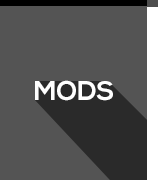
<style>
.page{position:relative;width:158px;height:180px;background:#545454}
.page>*{position:absolute;margin:0}
.t1{font:26.8px "NexaBold";color:#ffffff}
</style>
<div class="page">
<p class="t1" style="left:35px;top:80px;width:78px;height:21px">MODS</p>
</div>
